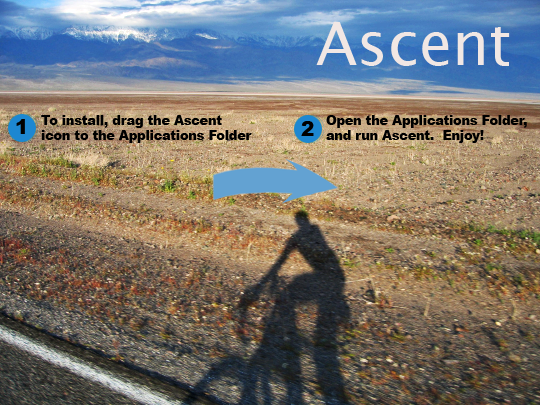
<style>
.page{position:relative;width:540px;height:405px}
.page>*{position:absolute;margin:0}
.t1{font:60px "LucidaGrande";color:#f1e7e4}
.t2{font:20px "Arial-Black";color:#000000}
.t3{font:12.5px "Arial-Black";color:#000000}
</style>
<div class="page">
<p class="t1" style="left:316px;top:22px;width:194px;height:44px">Ascent</p>
<p class="t2" style="left:16px;top:119px;width:9px;height:15px">1</p>
<p class="t3" style="left:41px;top:115px;width:211px;height:28px">To install, drag the Ascent<br>icon to the Applications Folder</p>
<p class="t2" style="left:301px;top:121px;width:13px;height:15px">2</p>
<p class="t3" style="left:326px;top:115px;width:201px;height:28px">Open the Applications Folder,<br>and run Ascent.  Enjoy!</p>
</div>
